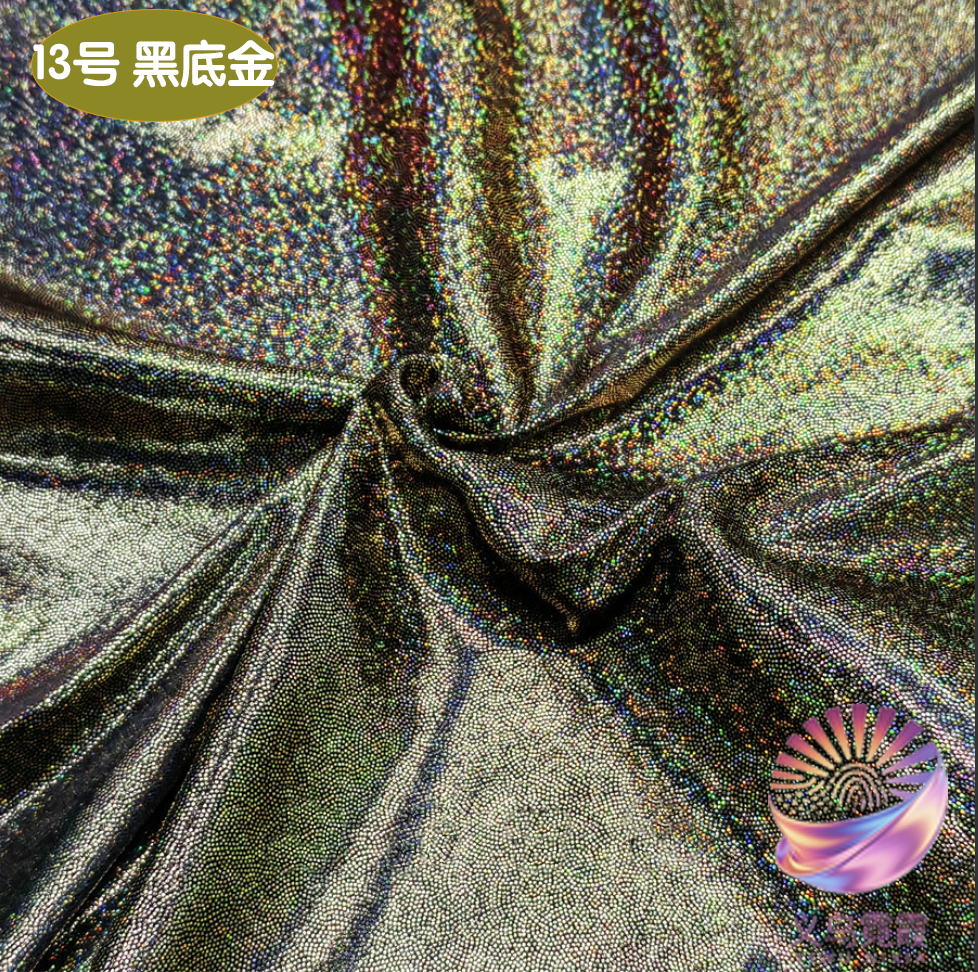
<style>
.page{position:relative;width:978px;height:972px}
.page>*{position:absolute;margin:0}
.t1{font:49.1px "STYuanti-SC-Bold";color:#ffffff;scale:0.97 1}
.t2{font:84.6px "STBaoliSC-Regular";color:#ffffff;scale:0.97 1}
</style>
<div class="page">
<p class="t1" style="left:33px;top:39px;width:242px;height:49px"><span class="t2">         </span>13号 黑底金</p>
</div>
